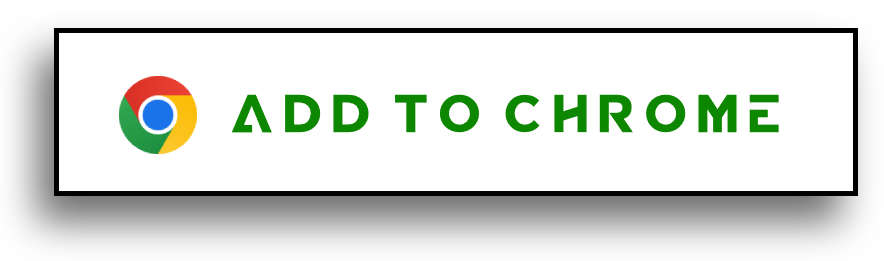
<style>
.page{position:relative;width:884px;height:261px;background:#ffffff}
.page>*{position:absolute;margin:0}
.t1{font:53px "BabaPro-Bold";color:#0d8700}
</style>
<div class="page">
<p class="t1" style="left:231px;top:94px;width:548px;height:39px">Add to Chrome</p>
</div>
